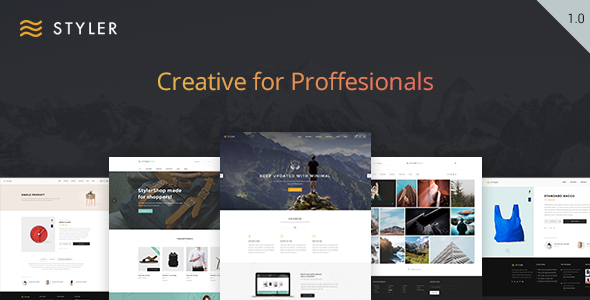
<style>
.page{position:relative;width:590px;height:300px}
.page>*{position:absolute;margin:0}
.t1{font:13px "Roboto-Regular";color:#222222}
.t2{font:15.6px "FuturaLT";letter-spacing:0.2em;color:#ffffff;text-transform:uppercase}
.t3{font:24px "OpenSans"}
</style>
<div class="page">
<p class="t1" style="left:568px;top:13px;width:16px;height:11px">1.0</p>
<p class="t2" style="left:53px;top:22px;width:64px;height:13px">styler</p>
<p class="t3" style="left:158px;top:71px;width:275px;height:20px">Creative for Proffesionals</p>
</div>
